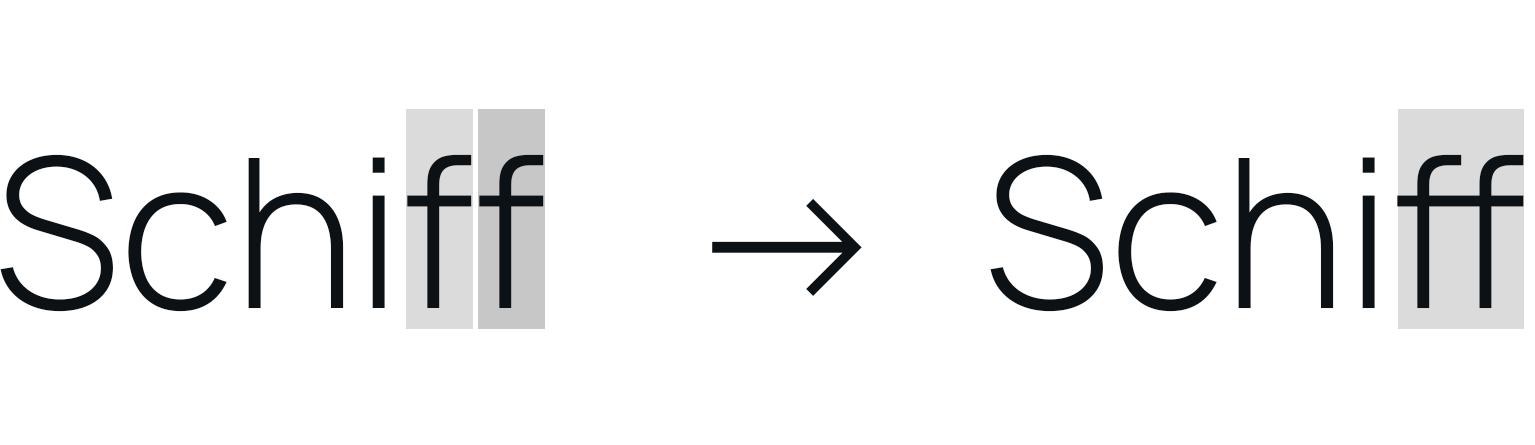
<style>
.page{position:relative;width:1535px;height:445px;background:#ffffff}
.page>*{position:absolute;margin:0}
.t1{font:208.3px "Manrope-Light";color:#0c1115}
</style>
<div class="page">
<p class="t1" style="left:0px;top:154px;width:544px;height:158px">Schiff</p>
<p class="t1" style="left:990px;top:154px;width:534px;height:158px">Schiff</p>
<p class="t1" style="left:712px;top:198px;width:150px;height:98px">→</p>
</div>
